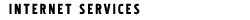
<style>
.page{position:relative;width:250px;height:20px;background:#ffffff}
.page>*{position:absolute;margin:0}
.t1{font:18px "Pakenham";letter-spacing:0.125em;color:#000000;text-transform:uppercase}
</style>
<div class="page">
<p class="t1" style="left:9px;top:3px;width:131px;height:12px">INTERNET SERVICES</p>
</div>
